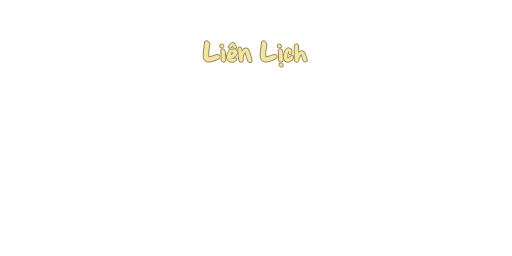
<style>
.page{position:relative;width:512px;height:256px;background:#ffffff}
.page>*{position:absolute;margin:0}
.t1{font:29.3px "BrianneTod";color:#f0e8a0}
</style>
<div class="page">
<p class="t1" style="left:203px;top:41px;width:104px;height:26px">Liên Lịch</p>
</div>
